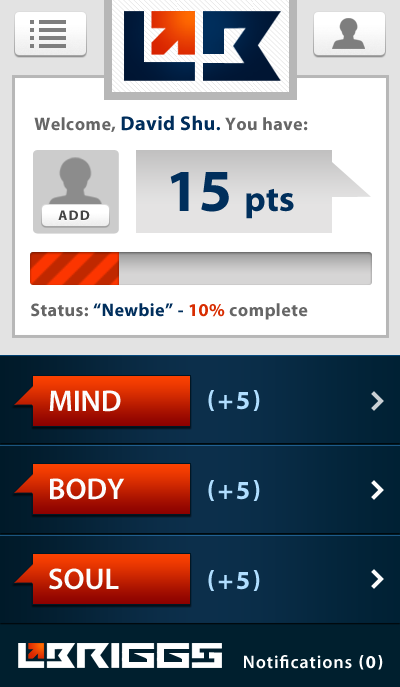
<style>
.page{position:relative;width:400px;height:687px;background:#ffffff}
.page>*{position:absolute;margin:0}
.t1{font:20px "MyriadPro-Bold";letter-spacing:0.025em;color:#002e5c}
.t2{font:18px "MyriadPro-Bold";letter-spacing:0.025em;color:#666666}
.t3{font:18px "MyriadPro-Bold";letter-spacing:0.025em;color:#002e5c}
.t4{font:36px "MyriadPro-Bold";color:#002f5c}
.t5{font:60px "MyriadPro-Bold";color:#002f5c}
.t6{font:14px "MyriadPro-Bold";letter-spacing:0.1em;color:#444444;text-transform:uppercase}
.t7{font:18px "MyriadPro-Bold";letter-spacing:0.025em;color:#d82d01}
.t8{font:30px "MyriadPro-Semibold";color:#fcfcfc}
.t9{font:26px "MyriadPro-Bold";letter-spacing:0.1em;color:#b0deff;text-transform:uppercase}
.t10{font:18px "MyriadPro-Semibold";letter-spacing:0.05em;color:#ffffff}
.t11{font:18px "MyriadPro-Bold";letter-spacing:0.1em;color:#ffffff;text-transform:uppercase}
</style>
<div class="page">
<p class="t1" style="left:34px;top:115px;width:274px;height:17px"><span class="t2">Welcome, </span>David Shu<span class="t3">. </span><span class="t2">You have:</span></p>
<p class="t4" style="left:170px;top:172px;width:124px;height:47px"><span class="t5">15 </span>pts</p>
<p class="t6" style="left:58px;top:210px;width:32px;height:10px">ADD</p>
<p class="t3" style="left:31px;top:303px;width:277px;height:17px"><span class="t2">Status:</span> “Newbie” - <span class="t7">10%</span><span class="t2"> complete</span></p>
<p class="t8" style="left:49px;top:390px;width:72px;height:22px">MIND</p>
<p class="t9" style="left:208px;top:390px;width:52px;height:21px">(+5)</p>
<p class="t8" style="left:50px;top:478px;width:75px;height:22px">BODY</p>
<p class="t9" style="left:208px;top:480px;width:52px;height:21px">(+5)</p>
<p class="t8" style="left:49px;top:568px;width:70px;height:22px">SOUL</p>
<p class="t9" style="left:208px;top:570px;width:52px;height:21px">(+5)</p>
<p class="t10" style="left:244px;top:655px;width:139px;height:15px">Notifications<span class="t11"> (0)</span></p>
</div>
